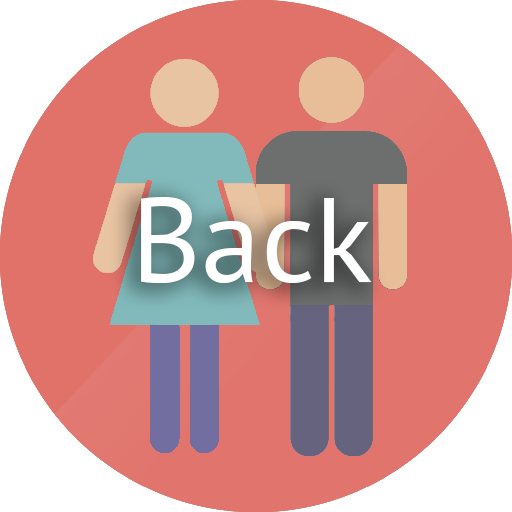
<style>
.page{position:relative;width:512px;height:512px;background:#ffffff}
.page>*{position:absolute;margin:0}
.t1{font:120px "PTSans-Regular";color:#ffffff}
</style>
<div class="page">
<p class="t1" style="left:141px;top:197px;width:231px;height:86px">Back</p>
</div>
